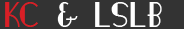
<style>
.page{position:relative;width:184px;height:29px;background:#333333}
.page>*{position:absolute;margin:0}
.t1{font:34.6px "FashionVictim";letter-spacing:0.025em;color:#d91f26;text-transform:uppercase;scale:0.85 1}
.t2{font:34.6px "FashionVictim";letter-spacing:0.025em;color:#fefefe;text-transform:uppercase;scale:0.85 1}
</style>
<div class="page">
<p class="t1" style="left:5px;top:2px;width:33px;height:25px">KC</p>
<p class="t2" style="left:57px;top:2px;width:105px;height:25px">&amp; LSLB</p>
</div>
